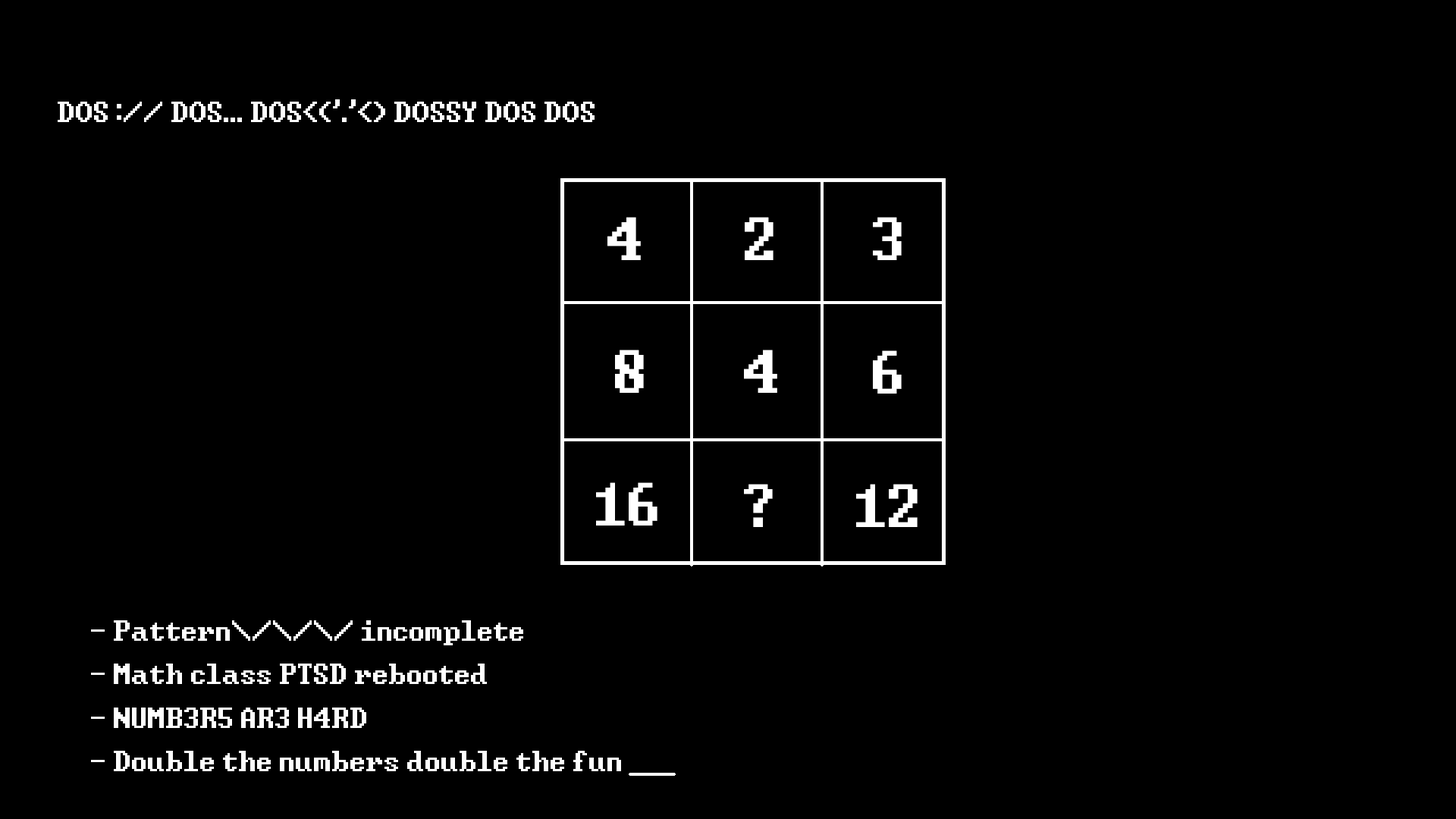
<style>
.page{position:relative;width:1456px;height:819px;background:#000000}
.page>*{position:absolute;margin:0}
.t1{font:36.4px "Windows-Command-Prompt";color:#ffffff}
.t2{font:75.8px "Windows-Command-Prompt";color:#ffffff}
</style>
<div class="page">
<p class="t1" style="left:58px;top:99px;width:537px;height:23px">DOS :// DOS... DOS&lt;('.'&lt;) DOSSY DOS DOS</p>
<p class="t2" style="left:607px;top:217px;width:34px;height:43px">4</p>
<p class="t2" style="left:745px;top:217px;width:28px;height:43px">2</p>
<p class="t2" style="left:873px;top:217px;width:29px;height:43px">3</p>
<p class="t2" style="left:615px;top:350px;width:29px;height:43px">8</p>
<p class="t2" style="left:744px;top:350px;width:33px;height:43px">4</p>
<p class="t2" style="left:873px;top:350px;width:29px;height:44px">6</p>
<p class="t2" style="left:596px;top:482px;width:61px;height:44px">16</p>
<p class="t2" style="left:744px;top:484px;width:29px;height:43px">?</p>
<p class="t2" style="left:856px;top:484px;width:62px;height:43px">12</p>
<p class="t1" style="left:91px;top:620px;width:530px;height:151px">- Pattern\/\/\/ incomplete<br>- Math class PTSD rebooted<br>- NUMB3R5 AR3 H4RD<br>- Double the numbers double the fun</p>
</div>
